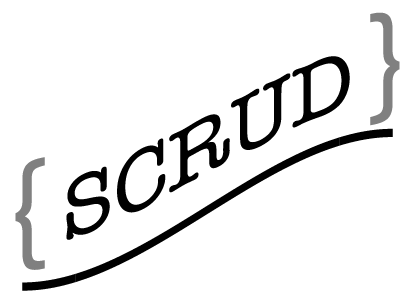
<style>
.page{position:relative;width:420px;height:300px;background:#ffffff}
.page>*{position:absolute;margin:0}
.t1{font:85px "AmericanTypewriter";color:#000000}
.t2{font:128px "AmericanTypewriter";color:#808080}
.t3{font:128px "AmericanTypewriter";color:#000000;scale:0.83 1}
</style>
<div class="page">
<p class="t1" style="left:15px;top:12px;width:385px;height:258px;text-align:center"><span class="t2">{</span>SCRUD<span class="t2">}</span></p>
<p class="t3" style="left:22px;top:128px;width:371px;height:163px">_______</p>
</div>
